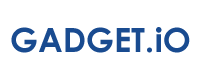
<style>
.page{position:relative;width:200px;height:80px;background:#ffffff}
.page>*{position:absolute;margin:0}
.t1{font:33.3px "CenturyGothic-Bold";color:#194b90}
</style>
<div class="page">
<p class="t1" style="left:11px;top:27px;width:179px;height:26px">GADGET.iO</p>
</div>
